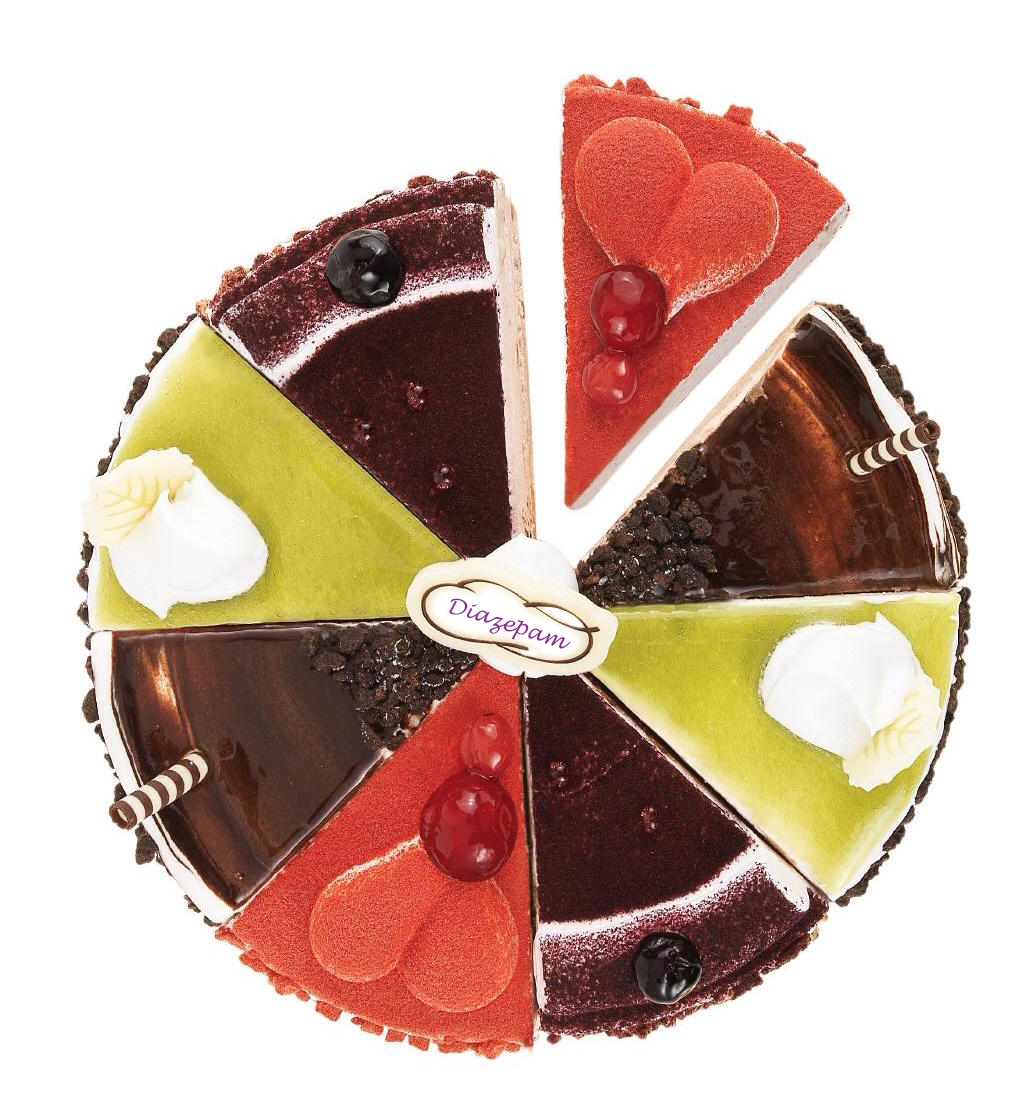
<style>
.page{position:relative;width:1012px;height:1114px;background:#ffffff}
.page>*{position:absolute;margin:0}
.t1{font:21.3px "LucidaHandwriting-Italic";color:#882d8e}
</style>
<div class="page">
<p class="t1" style="left:449px;top:598px;width:122px;height:51px;rotate:18deg">Diazepam</p>
</div>
